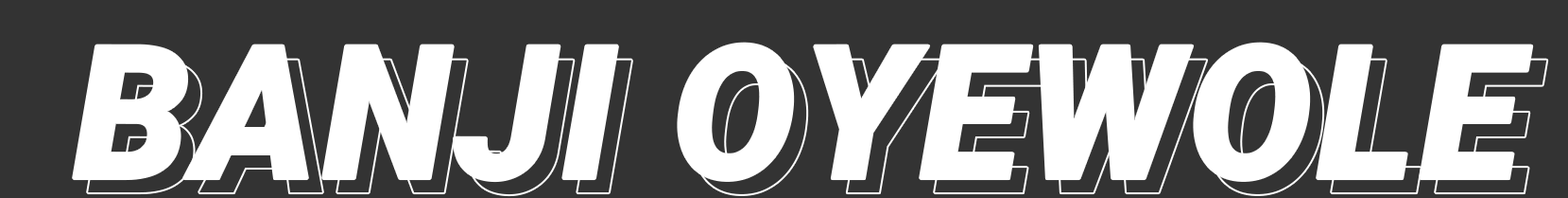
<style>
.page{position:relative;width:1568px;height:198px;background:#333333}
.page>*{position:absolute;margin:0}
.t1{font:184.8px "Roboto-BlackItalic";letter-spacing:0.028em;color:#ffffff}
</style>
<div class="page">
<p class="t1" style="left:74px;top:43px;width:1458px;height:138px">BANJI OYEWOLE</p>
</div>
